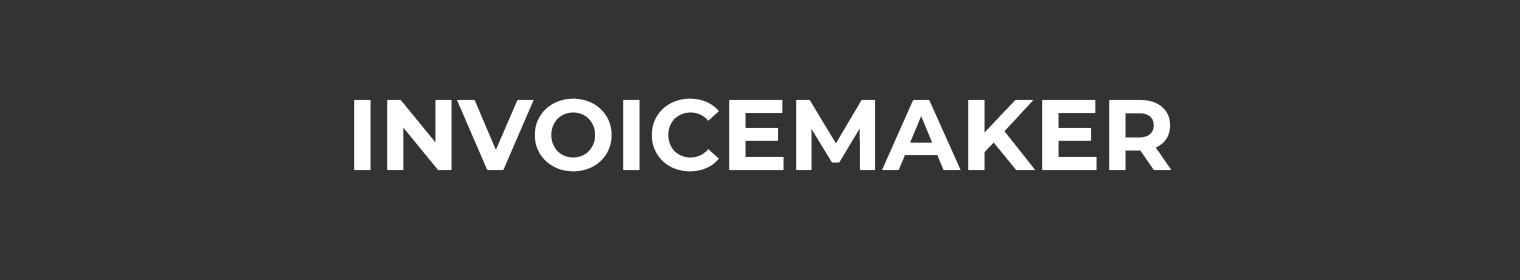
<style>
.page{position:relative;width:1520px;height:280px;background:#333333}
.page>*{position:absolute;margin:0}
.t1{font:100px "MontserratRoman-Bold";color:#ffffff}
</style>
<div class="page">
<p class="t1" style="left:354px;top:98px;width:818px;height:74px">INVOICEMAKER</p>
</div>
